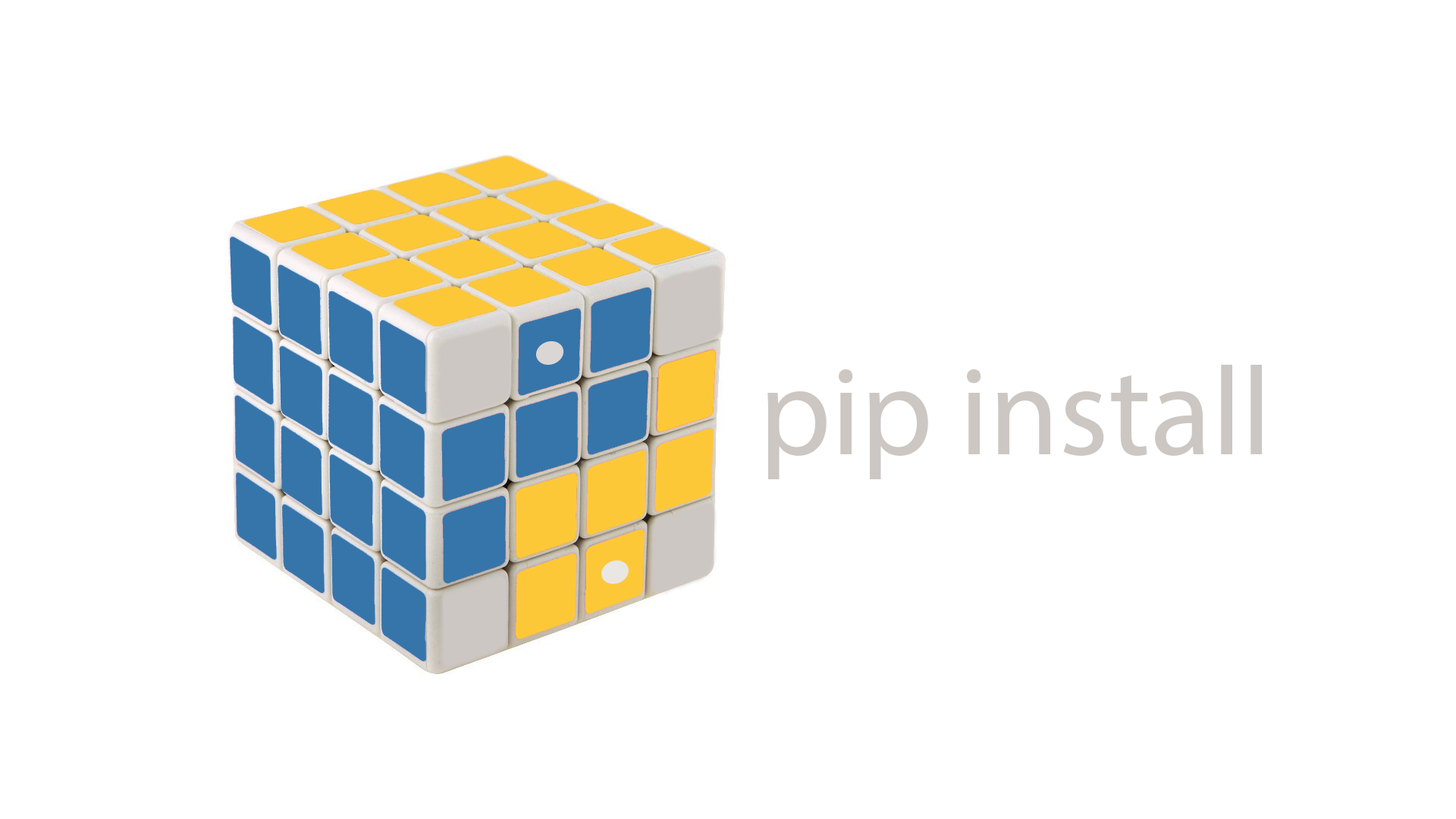
<style>
.page{position:relative;width:1456px;height:819px;background:#ffffff}
.page>*{position:absolute;margin:0}
.t1{font:126.4px "MyriadPro-Regular";color:#ccc7c3}
</style>
<div class="page">
<p class="t1" style="left:767px;top:365px;width:495px;height:114px">pip install</p>
</div>
